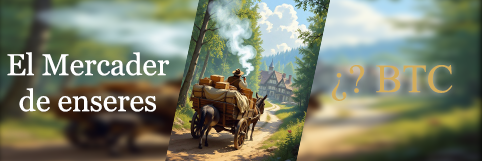
<style>
.page{position:relative;width:482px;height:161px}
.page>*{position:absolute;margin:0}
.t1{font:30px "Georgia";color:#ffffff}
.t2{font:40px "MongolianBaiti";color:#d3ad5b}
</style>
<div class="page">
<p class="t1" style="left:7px;top:52px;width:163px;height:60px;text-align:center">El Mercader de enseres</p>
<p class="t2" style="left:331px;top:65px;width:122px;height:36px">¿? BTC</p>
</div>
